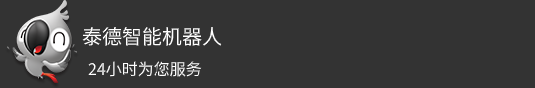
<style>
.page{position:relative;width:535px;height:88px;background:#333333}
.page>*{position:absolute;margin:0}
.t1{font:20px "SourceHanSansSC-Regular";color:#ffffff}
.t2{font:16px "SourceHanSansSC-Regular";color:#ffffff}
</style>
<div class="page">
<p class="t1" style="left:82px;top:27px;width:140px;height:19px">泰德智能机器人</p>
<p class="t2" style="left:88px;top:61px;width:114px;height:16px">24小时为您服务</p>
</div>
